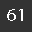
<style>
.page{position:relative;width:32px;height:32px;background:#333333}
.page>*{position:absolute;margin:0}
.t1{font:17.8px "MyriadPro-Regular";color:#ffffff;scale:1.12 1}
</style>
<div class="page">
<p class="t1" style="left:7px;top:9px;width:16px;height:12px">61</p>
</div>
